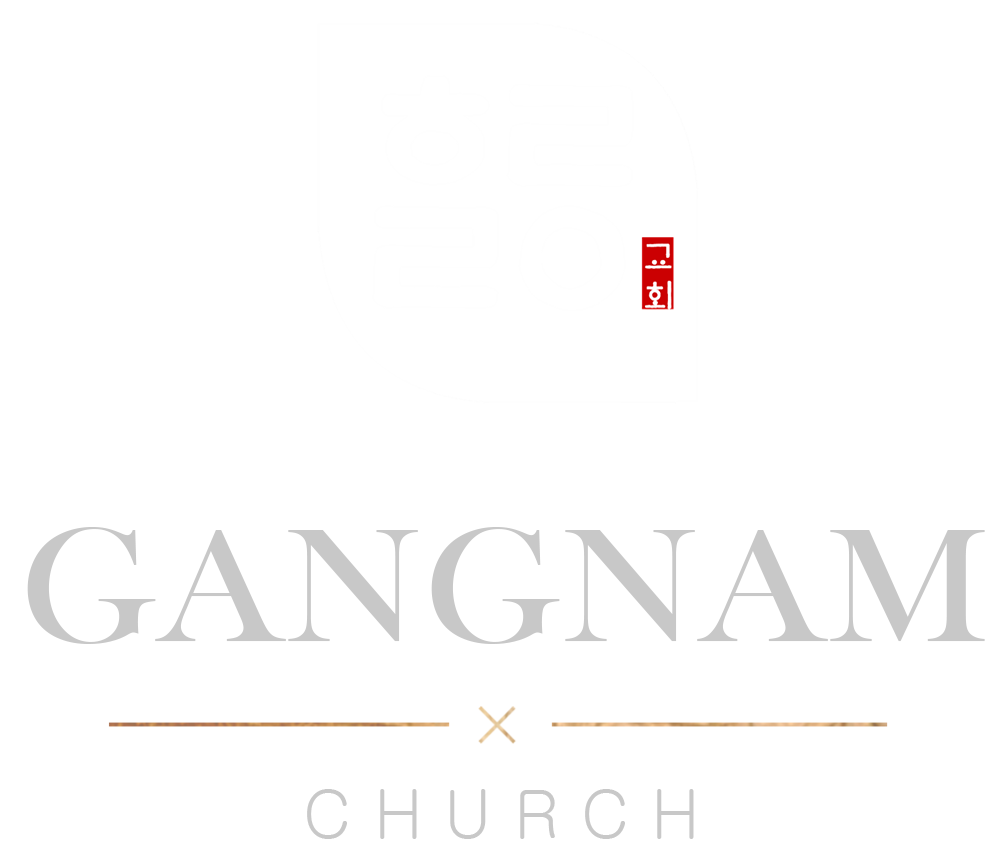
<style>
.page{position:relative;width:1000px;height:860px;background:#ffffff}
.page>*{position:absolute;margin:0}
.t1{font:166.7px "BaskOldFace";color:#c8c8c8;scale:1.1 1}
.t2{font:66.7px "Gulim";color:#c8c8c8}
</style>
<div class="page">
<p class="t1" style="left:27px;top:527px;width:958px;height:117px">GANGNAM</p>
<p class="t2" style="left:307px;top:789px;width:387px;height:50px">C H U R C H</p>
</div>
